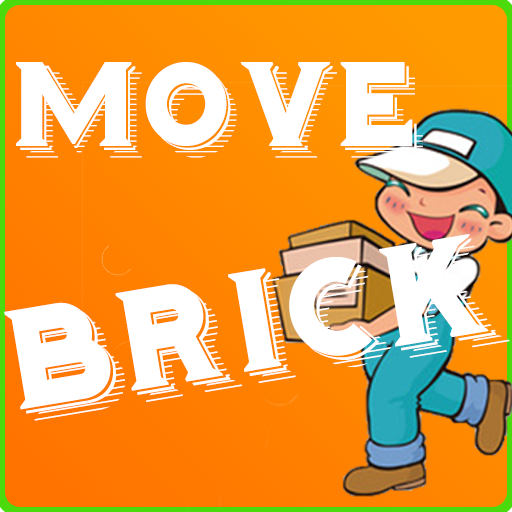
<style>
.page{position:relative;width:512px;height:512px}
.page>*{position:absolute;margin:0}
.t1{font:104.8px "Hominis";color:#ffffff}
.t2{font:123.2px "Hominis";color:#ffffff}
</style>
<div class="page">
<p class="t1" style="left:16px;top:62px;width:407px;height:96px">Move</p>
<p class="t2" style="left:4px;top:234px;width:506px;height:187px;rotate:-10deg">Brick</p>
</div>
